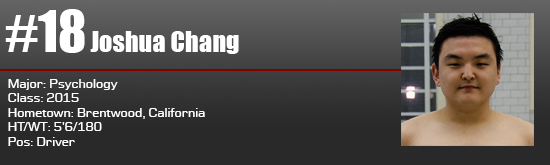
<style>
.page{position:relative;width:550px;height:165px}
.page>*{position:absolute;margin:0}
.t1{font:52.8px "Impact";color:#ffffff}
.t2{font:26.4px "Impact";color:#ffffff}
.t3{font:12px "Moire";color:#ffffff}
</style>
<div class="page">
<p class="t1" style="left:5px;top:9px;width:80px;height:44px">#18</p>
<p class="t2" style="left:90px;top:31px;width:149px;height:23px">Joshua Chang</p>
<p class="t3" style="left:8px;top:79px;width:197px;height:67px">Major: Psychology<br>Class: 2015<br>Hometown: Brentwood, California<br>HT/WT: 5'6/180<br>Pos: Driver</p>
</div>
